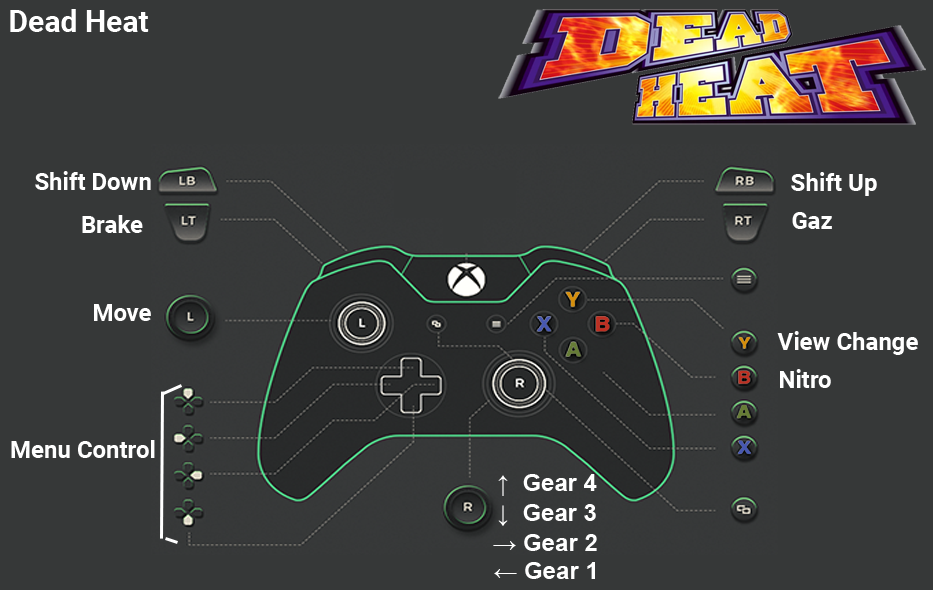
<style>
.page{position:relative;width:933px;height:590px;background:#363838}
.page>*{position:absolute;margin:0}
.t1{font:30px "Roboto-Bold";color:#ffffff}
.t2{font:24px "Roboto-Bold";color:#ffffff}
.t3{font:24px "Arial-BoldMT";color:#ffffff}
</style>
<div class="page">
<p class="t1" style="left:10px;top:9px;width:139px;height:23px">Dead Heat</p>
<p class="t2" style="left:35px;top:171px;width:116px;height:19px">Shift Down</p>
<p class="t2" style="left:791px;top:172px;width:86px;height:24px">Shift Up</p>
<p class="t2" style="left:82px;top:215px;width:61px;height:18px">Brake</p>
<p class="t2" style="left:792px;top:212px;width:40px;height:17px">Gaz</p>
<p class="t2" style="left:94px;top:304px;width:57px;height:17px">Move</p>
<p class="t2" style="left:777px;top:331px;width:141px;height:24px">View Change</p>
<p class="t2" style="left:780px;top:369px;width:51px;height:19px">Nitro</p>
<p class="t2" style="left:11px;top:440px;width:144px;height:18px">Menu Control</p>
<p class="t3" style="left:498px;top:474px;width:99px;height:22px">↑  Gear 4</p>
<p class="t3" style="left:498px;top:504px;width:98px;height:22px">↓  Gear 3</p>
<p class="t3" style="left:493px;top:534px;width:104px;height:17px">→ Gear 2</p>
<p class="t3" style="left:494px;top:562px;width:101px;height:17px">← Gear 1</p>
</div>
